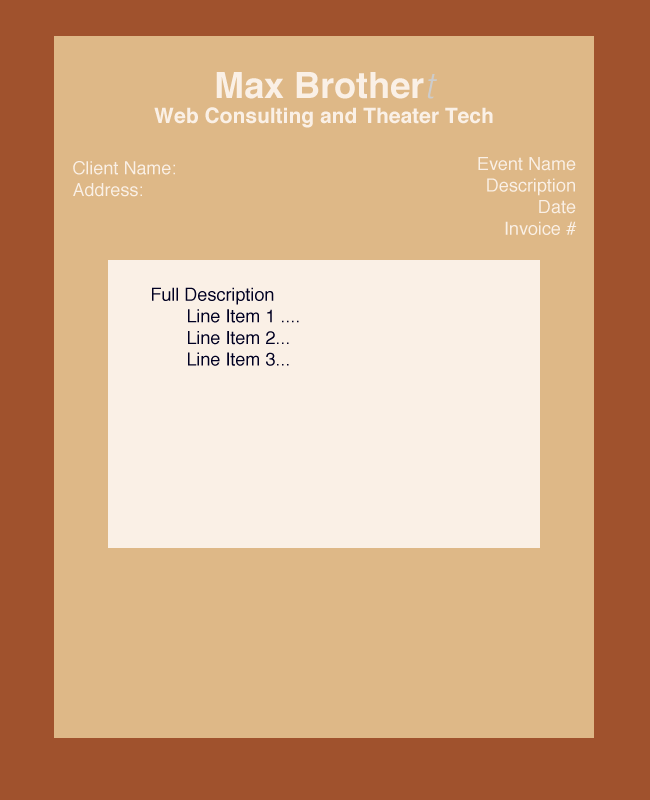
<style>
.page{position:relative;width:650px;height:800px;background:#deb887}
.page>*{position:absolute;margin:0}
.t1{font:21px "Helvetica-Bold";color:#faf0e6}
.t2{font:36px "Helvetica-Bold";color:#faf0e6}
.t3{font:36px "Helvetica-LightOblique";color:#cccccc}
.t4{font:18px "Helvetica";color:#faf0e6}
.t5{font:18px "Helvetica";color:#000022}
</style>
<div class="page">
<p class="t1" style="left:154px;top:72px;width:339px;height:56px;text-align:center"><span class="t2">Max Brother</span><span class="t3">t<br></span>Web Consulting and Theater Tech</p>
<p class="t4" style="left:73px;top:161px;width:102px;height:36px">Client Name: <br>Address:</p>
<p class="t4" style="left:478px;top:157px;width:99px;height:78px;text-align:right">Event Name<br>Description<br>Date<br>Invoice #</p>
<p class="t5" style="left:152px;top:287px;width:147px;height:79px">Full Description <br> Line Item 1 ....<br> Line Item 2...<br> Line Item 3...</p>
</div>
